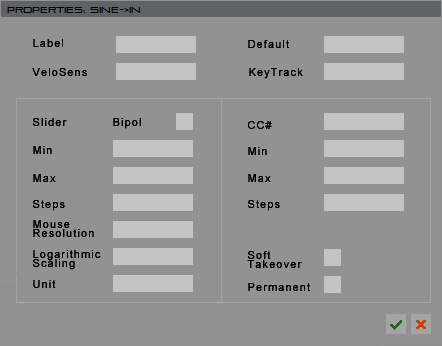
<style>
.page{position:relative;width:442px;height:346px;background:#929292}
.page>*{position:absolute;margin:0}
.t1{font:11px "ArialMT";letter-spacing:0.1em;color:#000000}
.t2{font:11px/9px "ArialMT";letter-spacing:0.1em;color:#000000}
</style>
<div class="page">
<p class="t1" style="left:33px;top:39px;width:30px;height:8px">Label</p>
<p class="t1" style="left:248px;top:40px;width:41px;height:8px">Default</p>
<p class="t1" style="left:32px;top:68px;width:55px;height:8px">VeloSens</p>
<p class="t1" style="left:249px;top:68px;width:54px;height:11px">KeyTrack</p>
<p class="t1" style="left:33px;top:118px;width:34px;height:8px">Slider</p>
<p class="t1" style="left:113px;top:118px;width:28px;height:11px">Bipol</p>
<p class="t1" style="left:248px;top:121px;width:24px;height:8px">CC#</p>
<p class="t1" style="left:33px;top:146px;width:19px;height:8px">Min</p>
<p class="t1" style="left:248px;top:147px;width:19px;height:8px">Min</p>
<p class="t1" style="left:33px;top:174px;width:23px;height:8px">Max</p>
<p class="t1" style="left:248px;top:174px;width:23px;height:8px">Max</p>
<p class="t1" style="left:33px;top:200px;width:32px;height:11px">Steps</p>
<p class="t1" style="left:248px;top:200px;width:32px;height:11px">Steps</p>
<p class="t2" style="left:33px;top:220px;width:61px;height:17px">Mouse<br>Resolution</p>
<p class="t2" style="left:33px;top:250px;width:68px;height:20px">Logarithmic<br>Scaling</p>
<p class="t2" style="left:247px;top:251px;width:55px;height:17px">Soft<br>Takeover</p>
<p class="t1" style="left:33px;top:280px;width:23px;height:8px">Unit</p>
<p class="t1" style="left:248px;top:283px;width:62px;height:8px">Permanent</p>
</div>
